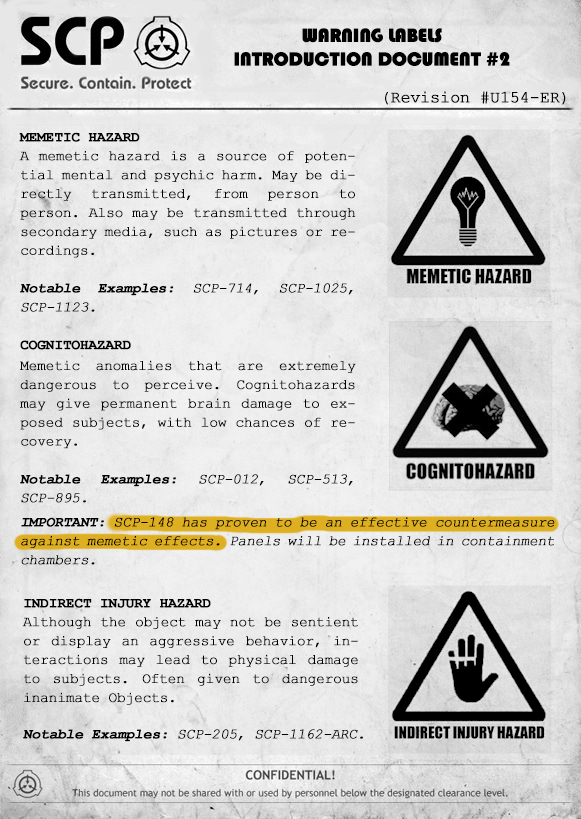
<style>
.page{position:relative;width:581px;height:819px}
.page>*{position:absolute;margin:0}
.t1{font:19.7px/23.6px "Bauhaus93";letter-spacing:-0.025em;color:#000000;text-transform:uppercase;font-weight:bold}
.t2{font:16.5px "CourierNewPSMT";letter-spacing:-0.025em;color:#000000;font-weight:bold}
.t3{font:14.2px/18.9px "CourierNewPSMT";letter-spacing:-0.025em;color:#000000;font-weight:bold}
.t4{font:14.2px/18.9px "CourierNewPS-BoldMT";letter-spacing:-0.025em;color:#000000;text-transform:uppercase;font-weight:bold}
.t5{font:14.2px/18.9px "CourierNewPS-BoldMT";letter-spacing:-0.025em;color:#000000;font-weight:bold;font-style:italic}
.t6{font:14.2px/18.9px "CourierNewPSMT";letter-spacing:-0.025em;color:#000000;font-weight:bold;font-style:italic}
.t7{font:14.2px "CourierNewPS-BoldMT";letter-spacing:-0.025em;color:#000000;text-transform:uppercase;font-weight:bold}
.t8{font:14.2px "CourierNewPSMT";letter-spacing:-0.025em;color:#000000;font-weight:bold;font-style:italic}
.t9{font:14.2px "CourierNewPS-BoldMT";letter-spacing:-0.025em;color:#000000;font-weight:bold;font-style:italic}
</style>
<div class="page">
<p class="t1" style="left:234px;top:28px;width:276px;height:38px;text-align:center">Warning Labels <br>Introduction Document #2</p>
<p class="t2" style="left:385px;top:91px;width:181px;height:14px">(Revision #U154-ER)</p>
<p class="t3" style="left:19px;top:132px;width:337px;height:180px;text-align:justify"><span class="t4">memetic hazard<br></span>A memetic hazard is a source of potential mental and psychic harm. May be directly transmitted, from person to person. Also may be transmitted through secondary media, such as pictures or recordings.<br><br><span class="t5">Notable Examples:</span><span class="t6"> SCP-714, SCP-1025, SCP-1123.</span></p>
<p class="t7" style="left:20px;top:340px;width:111px;height:10px">Cognitohazard</p>
<p class="t3" style="left:20px;top:360px;width:336px;height:143px;text-align:justify">Memetic anomalies that are extremely dangerous to perceive. Cognitohazards may give permanent brain damage to exposed subjects, with low chances of recovery.<br><br><span class="t5">Notable Examples:</span><span class="t6"> SCP-012, SCP-513, SCP-895.</span></p>
<p class="t6" style="left:21px;top:517px;width:534px;height:48px;text-align:justify"><span class="t5">IMPORTANT:</span> SCP-148 has proven to be an effective countermeasure against memetic effects. Panels will be installed in containment chambers.</p>
<p class="t3" style="left:22px;top:598px;width:336px;height:107px;text-align:justify"><span class="t4">Indirect Injury Hazard<br></span>Although the object may not be sentient or display an aggressive behavior, interactions may lead to physical damage to subjects. Often given to dangerous inanimate Objects.</p>
<p class="t8" style="left:23px;top:729px;width:340px;height:13px"><span class="t9">Notable Examples:</span> SCP-205, SCP-1162-ARC.</p>
</div>
